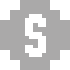
<style>
.page{position:relative;width:70px;height:70px;background:#aaa9a9}
.page>*{position:absolute;margin:0}
.t1{font:51.6px "04b25";letter-spacing:0.014em;color:#ffffff}
</style>
<div class="page">
<p class="t1" style="left:25px;top:14px;width:21px;height:43px">S</p>
</div>
